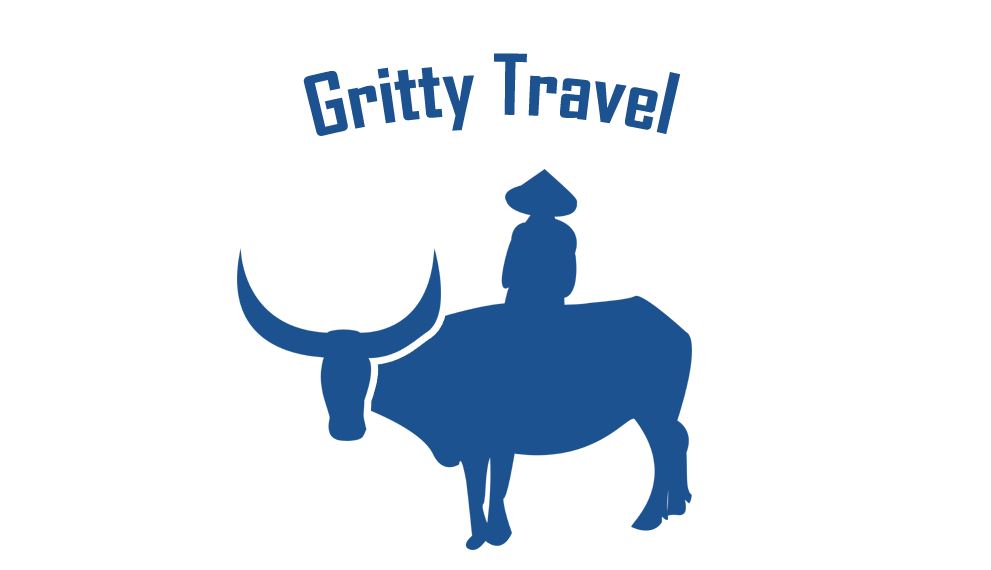
<style>
.page{position:relative;width:991px;height:570px;background:#ffffff}
.page>*{position:absolute;margin:0}
.t1{font:80px "AgencyFB-Bold";color:#1c5290}
</style>
<div class="page">
<p class="t1" style="left:303px;top:53px;width:378px;height:83px">Gritty Travel</p>
</div>
